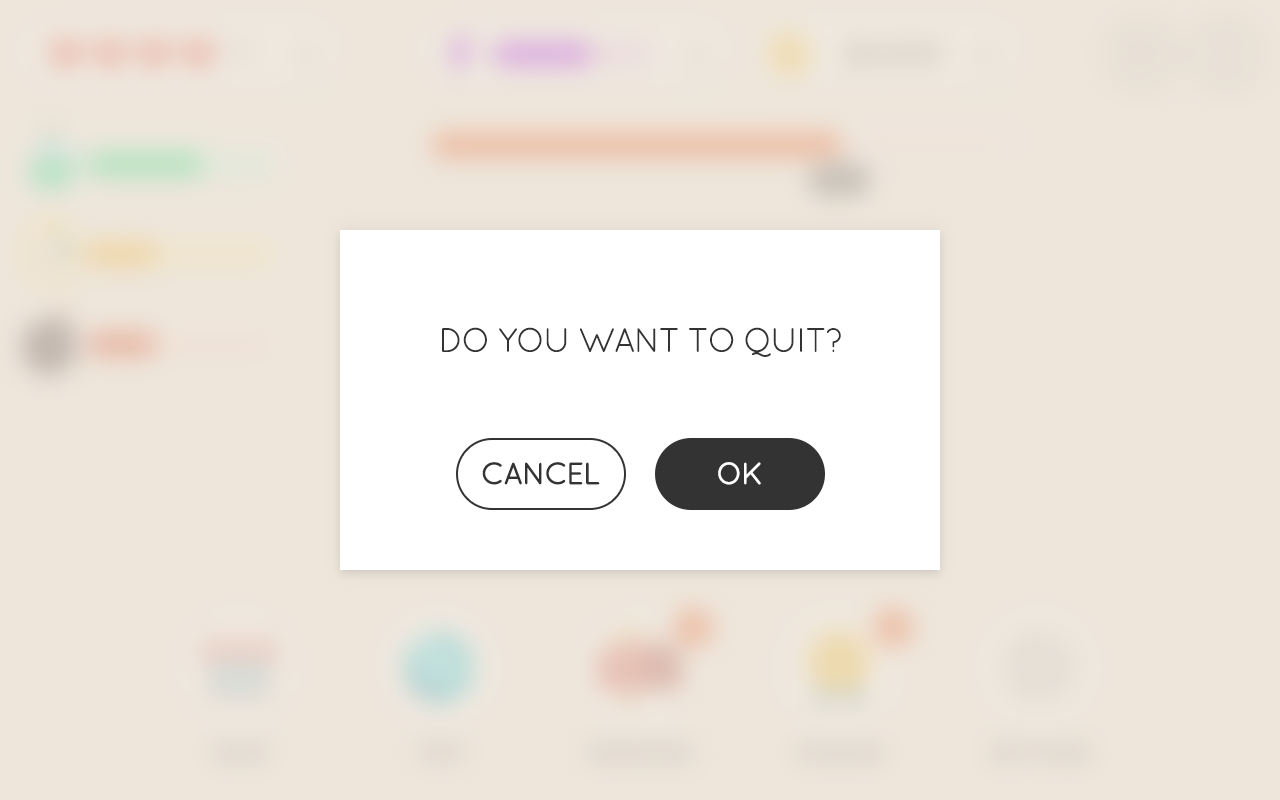
<style>
.page{position:relative;width:1280px;height:800px;background:#eee6db}
.page>*{position:absolute;margin:0}
.t1{font:34px "QuicksandBook-Regular";letter-spacing:-0.05em;color:#333333;text-transform:uppercase}
.t2{font:30px "QuicksandBook-Regular";letter-spacing:-0.05em;color:#333333;text-transform:uppercase;font-weight:bold}
.t3{font:30px "QuicksandBook-Regular";letter-spacing:-0.05em;color:#ffffff;text-transform:uppercase;font-weight:bold}
</style>
<div class="page">
<p class="t1" style="left:442px;top:327px;width:399px;height:30px">Do you want to quit?</p>
<p class="t2" style="left:482px;top:462px;width:118px;height:23px">CANCEL</p>
<p class="t3" style="left:718px;top:462px;width:43px;height:23px">OK</p>
</div>
